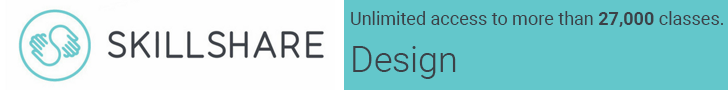
<style>
.page{position:relative;width:728px;height:90px;background:#63c7cb}
.page>*{position:absolute;margin:0}
.t1{font:18px "Roboto-Regular";color:#3c4147}
.t2{font:18px "Roboto-Bold";color:#3c4147}
.t3{font:36px "Roboto-Light";color:#3c4147}
</style>
<div class="page">
<p class="t1" style="left:351px;top:11px;width:372px;height:16px">Unlimited access to more than <span class="t2">27,000</span> classes.</p>
<p class="t3" style="left:353px;top:46px;width:103px;height:33px">Design</p>
</div>
